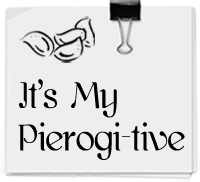
<style>
.page{position:relative;width:200px;height:182px;background:#eeeeee}
.page>*{position:absolute;margin:0}
.t1{font:39px "kawoszeh";letter-spacing:-0.01em;color:#000000;scale:0.91 1}
</style>
<div class="page">
<p class="t1" style="left:18px;top:79px;width:167px;height:81px">It’s My<br>Pierogi-tive</p>
</div>
